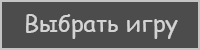
<style>
.page{position:relative;width:200px;height:50px;background:#4c4c4c}
.page>*{position:absolute;margin:0}
.t1{font:24px "ComicSansMS";color:#dedede}
</style>
<div class="page">
<p class="t1" style="left:26px;top:14px;width:152px;height:25px">Выбрать игру</p>
</div>
